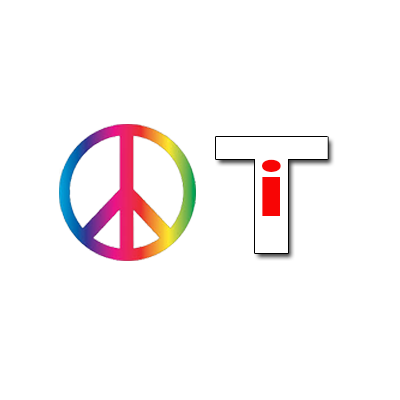
<style>
.page{position:relative;width:400px;height:400px;background:#ffffff}
.page>*{position:absolute;margin:0}
.t1{font:80px "MyriadPro-Bold";color:#f80505;scale:1.46 1}
</style>
<div class="page">
<p class="t1" style="left:262px;top:159px;width:19px;height:57px">i</p>
</div>
